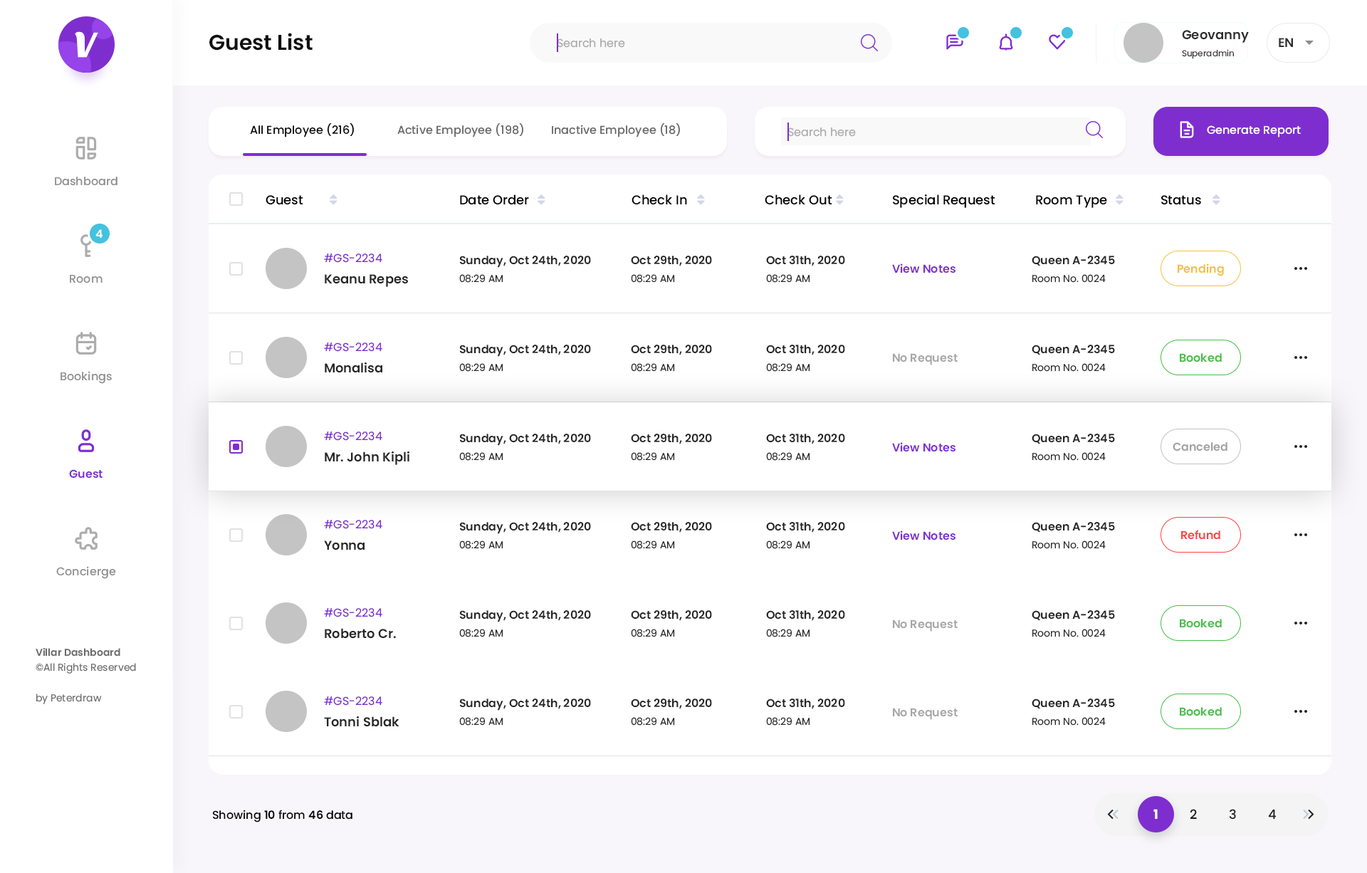
<style>
.page{position:relative;width:1367px;height:873px;background:#ffffff}
.page>*{position:absolute;margin:0}
.t1{font:12.8px "Poppins-SemiBold";color:#2e2e2e}
.t2{font:21.4px "Poppins-SemiBold";color:#0f0f0f}
.t3{font:11.4px "Poppins-Regular";color:#aaaaaa}
.t4{font:8.5px "Poppins-Regular";color:#2e2e2e}
.t5{font:11.4px "Poppins-Medium";color:#000000}
.t6{font:11.4px "Poppins-Medium";color:#666666}
.t7{font:11.4px "Poppins-Medium";color:#ffffff}
.t8{font:11.4px "Poppins-Medium";color:#8f8f8f}
.t9{font:12.8px "Poppins-Medium";color:#000000}
.t10{font:11.4px "Poppins-SemiBold";color:#ffffff}
.t11{font:11.4px "Poppins-Regular";color:#7e2ecf}
.t12{font:11.4px "Poppins-SemiBold";color:#262626}
.t13{font:11.4px "Poppins-SemiBold";color:#7e2ecf}
.t14{font:11.4px "Poppins-SemiBold";color:#f3c13e}
.t15{font:12.8px "Poppins-SemiBold";color:#262626}
.t16{font:10px "Poppins-Regular";color:#262626}
.t17{font:11.4px "Poppins-SemiBold";color:#a7a7a7}
.t18{font:11.4px "Poppins-SemiBold";color:#45bf43}
.t19{font:11.4px "Poppins-SemiBold";color:#a1a1a1}
.t20{font:11.4px "Poppins-SemiBold";color:#ff4242}
.t21{font:10px "Poppins-SemiBold";color:#6b6b6b}
.t22{font:10px "Poppins-Regular";color:#6b6b6b}
.t23{font:11.4px "Poppins-SemiBold";color:#000000}
.t24{font:12.8px "Poppins-Bold";color:#ffffff}
.t25{font:12.8px "Poppins-Medium";color:#202020}
</style>
<div class="page">
<p class="t1" style="left:1181px;top:30px;width:67px;height:13px">Geovanny</p>
<p class="t2" style="left:209px;top:33px;width:103px;height:18px">Guest List</p>
<p class="t3" style="left:557px;top:38px;width:68px;height:10px">Search here</p>
<p class="t1" style="left:1278px;top:38px;width:15px;height:9px">EN</p>
<p class="t4" style="left:1181px;top:49px;width:52px;height:10px">Superadmin</p>
<p class="t5" style="left:250px;top:123px;width:104px;height:14px">All Employee (216)</p>
<p class="t6" style="left:397px;top:123px;width:126px;height:14px">Active Employee (198)</p>
<p class="t6" style="left:552px;top:123px;width:128px;height:14px">Inactive Employee (18)</p>
<p class="t7" style="left:1206px;top:125px;width:94px;height:12px">Generate Report</p>
<p class="t3" style="left:787px;top:127px;width:69px;height:10px">Search here</p>
<p class="t8" style="left:55px;top:177px;width:62px;height:9px">Dashboard</p>
<p class="t9" style="left:265px;top:195px;width:38px;height:10px">Guest</p>
<p class="t9" style="left:460px;top:194px;width:69px;height:11px">Date Order</p>
<p class="t9" style="left:631px;top:194px;width:56px;height:11px">Check In</p>
<p class="t9" style="left:764px;top:194px;width:68px;height:11px">Check Out</p>
<p class="t9" style="left:893px;top:194px;width:102px;height:14px">Special Request</p>
<p class="t9" style="left:1036px;top:195px;width:71px;height:13px">Room Type</p>
<p class="t9" style="left:1161px;top:195px;width:40px;height:10px">Status</p>
<p class="t10" style="left:95px;top:229px;width:7px;height:9px">4</p>
<p class="t11" style="left:324px;top:253px;width:58px;height:10px">#GS-2234</p>
<p class="t12" style="left:459px;top:256px;width:132px;height:12px">Sunday, Oct 24th, 2020</p>
<p class="t12" style="left:631px;top:256px;width:81px;height:10px">Oct 29th, 2020</p>
<p class="t12" style="left:766px;top:256px;width:79px;height:10px">Oct 31th, 2020</p>
<p class="t12" style="left:1031px;top:256px;width:84px;height:9px">Queen A-2345</p>
<p class="t13" style="left:892px;top:263px;width:63px;height:10px">View Notes</p>
<p class="t14" style="left:1177px;top:263px;width:46px;height:13px">Pending</p>
<p class="t8" style="left:70px;top:275px;width:32px;height:8px">Room</p>
<p class="t15" style="left:325px;top:274px;width:83px;height:13px">Keanu Repes</p>
<p class="t16" style="left:459px;top:274px;width:44px;height:9px">08:29 AM</p>
<p class="t16" style="left:631px;top:274px;width:44px;height:9px">08:29 AM</p>
<p class="t16" style="left:766px;top:274px;width:44px;height:9px">08:29 AM</p>
<p class="t16" style="left:1032px;top:274px;width:73px;height:9px">Room No. 0024</p>
<p class="t11" style="left:324px;top:342px;width:58px;height:10px">#GS-2234</p>
<p class="t12" style="left:459px;top:344px;width:132px;height:13px">Sunday, Oct 24th, 2020</p>
<p class="t12" style="left:631px;top:344px;width:81px;height:11px">Oct 29th, 2020</p>
<p class="t12" style="left:766px;top:344px;width:79px;height:11px">Oct 31th, 2020</p>
<p class="t17" style="left:893px;top:353px;width:64px;height:12px">No Request</p>
<p class="t12" style="left:1031px;top:344px;width:84px;height:10px">Queen A-2345</p>
<p class="t18" style="left:1179px;top:353px;width:42px;height:9px">Booked</p>
<p class="t15" style="left:325px;top:362px;width:57px;height:11px">Monalisa</p>
<p class="t16" style="left:459px;top:363px;width:44px;height:9px">08:29 AM</p>
<p class="t16" style="left:631px;top:363px;width:44px;height:9px">08:29 AM</p>
<p class="t16" style="left:766px;top:363px;width:44px;height:9px">08:29 AM</p>
<p class="t16" style="left:1032px;top:363px;width:73px;height:9px">Room No. 0024</p>
<p class="t8" style="left:60px;top:371px;width:52px;height:13px">Bookings</p>
<p class="t11" style="left:324px;top:431px;width:58px;height:10px">#GS-2234</p>
<p class="t12" style="left:459px;top:433px;width:132px;height:13px">Sunday, Oct 24th, 2020</p>
<p class="t12" style="left:631px;top:433px;width:81px;height:11px">Oct 29th, 2020</p>
<p class="t12" style="left:766px;top:433px;width:79px;height:11px">Oct 31th, 2020</p>
<p class="t12" style="left:1031px;top:433px;width:84px;height:10px">Queen A-2345</p>
<p class="t13" style="left:892px;top:442px;width:63px;height:10px">View Notes</p>
<p class="t19" style="left:1172px;top:442px;width:55px;height:9px">Canceled</p>
<p class="t15" style="left:325px;top:451px;width:84px;height:14px">Mr. John Kipli</p>
<p class="t16" style="left:459px;top:452px;width:44px;height:8px">08:29 AM</p>
<p class="t16" style="left:631px;top:452px;width:44px;height:8px">08:29 AM</p>
<p class="t16" style="left:766px;top:452px;width:44px;height:8px">08:29 AM</p>
<p class="t16" style="left:1032px;top:452px;width:73px;height:8px">Room No. 0024</p>
<p class="t13" style="left:69px;top:469px;width:33px;height:9px">Guest</p>
<p class="t11" style="left:324px;top:520px;width:58px;height:9px">#GS-2234</p>
<p class="t12" style="left:459px;top:522px;width:132px;height:12px">Sunday, Oct 24th, 2020</p>
<p class="t12" style="left:631px;top:522px;width:81px;height:10px">Oct 29th, 2020</p>
<p class="t12" style="left:766px;top:522px;width:79px;height:10px">Oct 31th, 2020</p>
<p class="t12" style="left:1031px;top:522px;width:84px;height:10px">Queen A-2345</p>
<p class="t13" style="left:892px;top:530px;width:63px;height:10px">View Notes</p>
<p class="t20" style="left:1181px;top:530px;width:39px;height:9px">Refund</p>
<p class="t15" style="left:324px;top:540px;width:40px;height:10px">Yonna</p>
<p class="t16" style="left:459px;top:540px;width:44px;height:9px">08:29 AM</p>
<p class="t16" style="left:631px;top:540px;width:44px;height:9px">08:29 AM</p>
<p class="t16" style="left:766px;top:540px;width:44px;height:9px">08:29 AM</p>
<p class="t16" style="left:1032px;top:540px;width:73px;height:9px">Room No. 0024</p>
<p class="t8" style="left:56px;top:566px;width:60px;height:13px">Concierge</p>
<p class="t11" style="left:324px;top:608px;width:58px;height:9px">#GS-2234</p>
<p class="t12" style="left:459px;top:610px;width:132px;height:12px">Sunday, Oct 24th, 2020</p>
<p class="t12" style="left:631px;top:610px;width:81px;height:11px">Oct 29th, 2020</p>
<p class="t12" style="left:766px;top:610px;width:79px;height:11px">Oct 31th, 2020</p>
<p class="t12" style="left:1031px;top:610px;width:84px;height:10px">Queen A-2345</p>
<p class="t15" style="left:325px;top:628px;width:71px;height:10px">Roberto Cr.</p>
<p class="t16" style="left:459px;top:628px;width:44px;height:9px">08:29 AM</p>
<p class="t16" style="left:631px;top:628px;width:44px;height:9px">08:29 AM</p>
<p class="t16" style="left:766px;top:628px;width:44px;height:9px">08:29 AM</p>
<p class="t17" style="left:893px;top:619px;width:64px;height:12px">No Request</p>
<p class="t16" style="left:1032px;top:628px;width:73px;height:9px">Room No. 0024</p>
<p class="t18" style="left:1179px;top:619px;width:42px;height:9px">Booked</p>
<p class="t21" style="left:36px;top:648px;width:84px;height:8px">Villar Dashboard</p>
<p class="t22" style="left:36px;top:663px;width:100px;height:10px">©All Rights Reserved</p>
<p class="t22" style="left:36px;top:693px;width:66px;height:11px">by Peterdraw</p>
<p class="t11" style="left:324px;top:696px;width:58px;height:9px">#GS-2234</p>
<p class="t12" style="left:459px;top:698px;width:132px;height:12px">Sunday, Oct 24th, 2020</p>
<p class="t12" style="left:631px;top:698px;width:81px;height:11px">Oct 29th, 2020</p>
<p class="t12" style="left:766px;top:698px;width:79px;height:11px">Oct 31th, 2020</p>
<p class="t12" style="left:1031px;top:698px;width:84px;height:10px">Queen A-2345</p>
<p class="t17" style="left:893px;top:707px;width:64px;height:13px">No Request</p>
<p class="t18" style="left:1179px;top:707px;width:42px;height:9px">Booked</p>
<p class="t15" style="left:324px;top:716px;width:75px;height:11px">Tonni Sblak</p>
<p class="t16" style="left:459px;top:717px;width:44px;height:8px">08:29 AM</p>
<p class="t16" style="left:631px;top:717px;width:44px;height:8px">08:29 AM</p>
<p class="t16" style="left:766px;top:717px;width:44px;height:8px">08:29 AM</p>
<p class="t16" style="left:1032px;top:717px;width:73px;height:8px">Room No. 0024</p>
<p class="t5" style="left:213px;top:809px;width:139px;height:13px">Showing <span class="t23">10 </span>from <span class="t23">46 </span>data</p>
<p class="t24" style="left:1153px;top:809px;width:4px;height:10px">1</p>
<p class="t25" style="left:1189px;top:809px;width:7px;height:10px">2</p>
<p class="t25" style="left:1228px;top:809px;width:8px;height:10px">3</p>
<p class="t25" style="left:1268px;top:809px;width:8px;height:10px">4</p>
</div>
